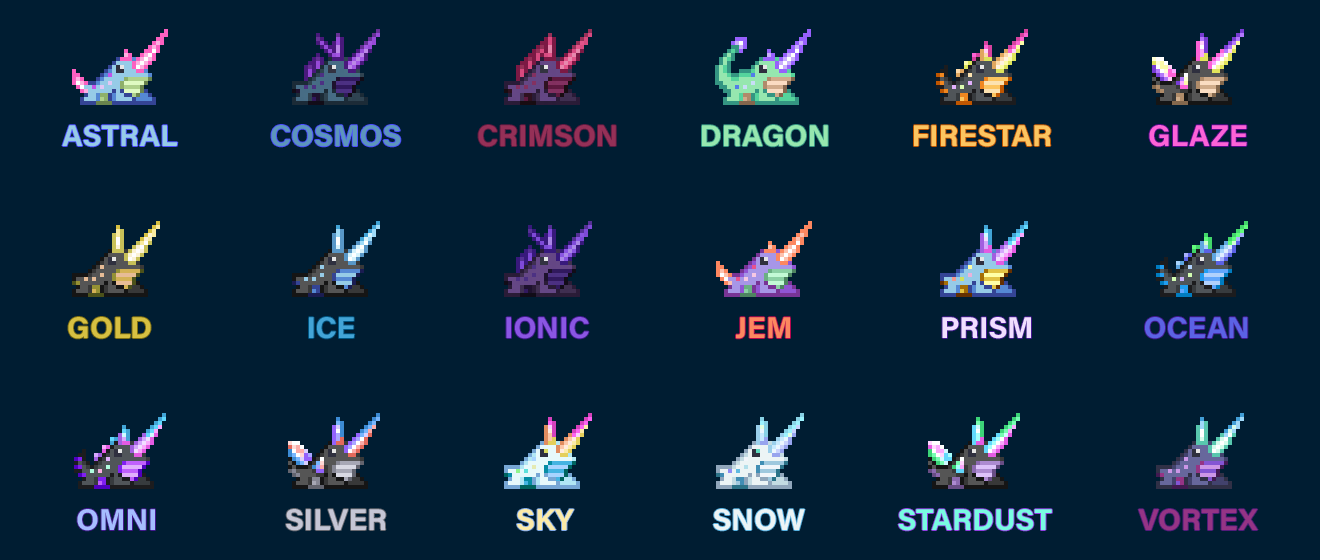
<style>
.page{position:relative;width:1320px;height:560px;background:#001d32}
.page>*{position:absolute;margin:0}
.t1{font:30px "AcuminConcept-Bold";color:#96cbe7}
.t2{font:30px "AcuminConcept-Bold";color:#5c95bc}
.t3{font:30px "AcuminConcept-Bold";color:#953057}
.t4{font:30px "AcuminConcept-Bold";color:#96e7af}
.t5{font:30px "AcuminConcept-Bold";color:#fcc560}
.t6{font:30px "AcuminConcept-Bold";color:#fc62d7}
.t7{font:30px "AcuminConcept-Bold";color:#d6c042}
.t8{font:30px "AcuminConcept-Bold";color:#42a4d6}
.t9{font:30px "AcuminConcept-Bold";color:#8a56e3}
.t10{font:30px "AcuminConcept-Bold";color:#fc8760}
.t11{font:30px "AcuminConcept-Bold";color:#f1deff}
.t12{font:30px "AcuminConcept-Bold";color:#5b62e4}
.t13{font:30px "AcuminConcept-Bold";color:#a6bdff}
.t14{font:30px "AcuminConcept-Bold";color:#c5c6d5}
.t15{font:30px "AcuminConcept-Bold";color:#fceba8}
.t16{font:30px "AcuminConcept-Bold";color:#ecf4f5}
.t17{font:30px "AcuminConcept-Bold";color:#78fce2}
.t18{font:30px "AcuminConcept-Bold";color:#953485}
</style>
<div class="page">
<p class="t1" style="left:62px;top:125px;width:116px;height:22px">ASTRAL</p>
<p class="t2" style="left:271px;top:125px;width:130px;height:22px">COSMOS</p>
<p class="t3" style="left:478px;top:125px;width:138px;height:22px">CRIMSON</p>
<p class="t4" style="left:702px;top:125px;width:126px;height:22px">DRAGON</p>
<p class="t5" style="left:914px;top:125px;width:137px;height:22px">FIRESTAR</p>
<p class="t6" style="left:1149px;top:125px;width:98px;height:22px">GLAZE</p>
<p class="t7" style="left:68px;top:317px;width:83px;height:22px">GOLD</p>
<p class="t8" style="left:309px;top:317px;width:46px;height:22px">ICE</p>
<p class="t9" style="left:506px;top:317px;width:83px;height:22px">IONIC</p>
<p class="t10" style="left:736px;top:317px;width:54px;height:22px">JEM</p>
<p class="t11" style="left:942px;top:317px;width:89px;height:22px">PRISM</p>
<p class="t12" style="left:1145px;top:317px;width:103px;height:22px">OCEAN</p>
<p class="t13" style="left:77px;top:509px;width:78px;height:22px">OMNI</p>
<p class="t14" style="left:286px;top:509px;width:100px;height:22px">SILVER</p>
<p class="t15" style="left:517px;top:509px;width:57px;height:22px">SKY</p>
<p class="t16" style="left:713px;top:509px;width:92px;height:22px">SNOW</p>
<p class="t17" style="left:898px;top:509px;width:154px;height:22px">STARDUST</p>
<p class="t18" style="left:1138px;top:509px;width:120px;height:22px">VORTEX</p>
</div>
